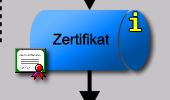
<style>
.page{position:relative;width:170px;height:100px;background:#c6c3c6}
.page>*{position:absolute;margin:0}
.t1{font:24px "Fixedsys";color:#ffff00}
.t2{font:14.7px "ArialMT";color:#000000}
</style>
<div class="page">
<p class="t1" style="left:129px;top:12px;width:12px;height:19px">i</p>
<p class="t2" style="left:53px;top:33px;width:57px;height:12px">Zertifikat</p>
</div>
